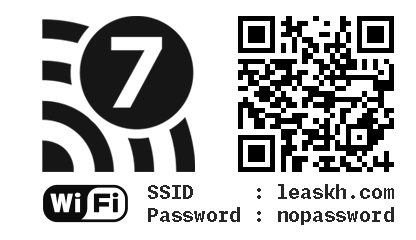
<style>
.page{position:relative;width:416px;height:240px;background:#ffffff}
.page>*{position:absolute;margin:0}
.t1{font:19px "MonaspaceNeon-Bold";color:#272727}
</style>
<div class="page">
<p class="t1" style="left:148px;top:184px;width:246px;height:41px">SSID     : leaskh.com<br>Password : nopassword</p>
</div>
